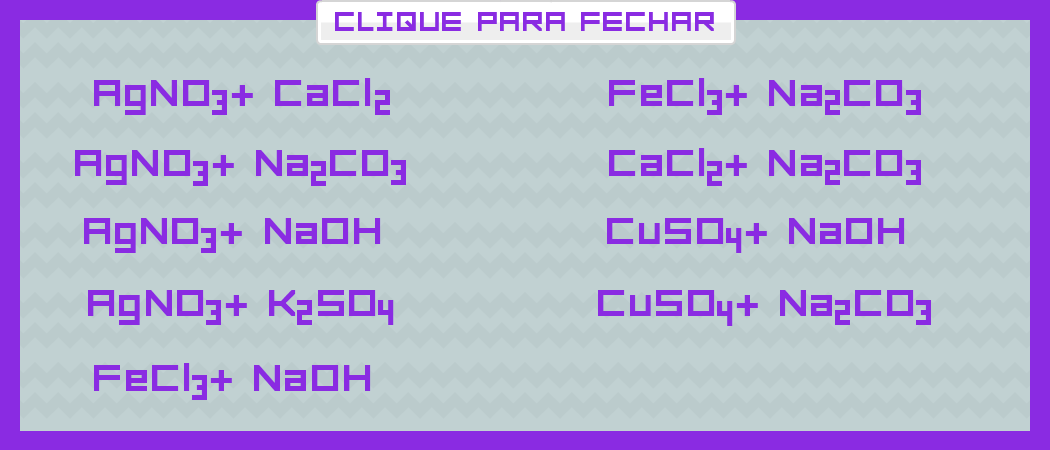
<style>
.page{position:relative;width:1050px;height:450px;background:#c1d1d2}
.page>*{position:absolute;margin:0}
.t1{font:36px "FORCED-SQUARE";color:#8a2be2}
.t2{font:50px "FORCED-SQUARE";color:#8a2be2}
.t3{font:48px "FORCED-SQUARE";color:#8a2be2}
</style>
<div class="page">
<p class="t1" style="left:335px;top:12px;width:379px;height:19px">CLIQUE PARA FECHAR</p>
<p class="t2" style="left:94px;top:78px;width:277px;height:37px">AgNO + CaCl</p>
<p class="t2" style="left:609px;top:78px;width:294px;height:28px">FeCl + Na CO</p>
<p class="t3" style="left:212px;top:90px;width:15px;height:25px">3</p>
<p class="t3" style="left:375px;top:90px;width:15px;height:25px">2</p>
<p class="t3" style="left:707px;top:90px;width:15px;height:25px">3</p>
<p class="t3" style="left:825px;top:90px;width:15px;height:25px">2</p>
<p class="t3" style="left:906px;top:90px;width:15px;height:25px">3</p>
<p class="t2" style="left:75px;top:150px;width:314px;height:35px">AgNO + Na CO</p>
<p class="t2" style="left:609px;top:148px;width:294px;height:28px">CaCl + Na CO</p>
<p class="t3" style="left:193px;top:161px;width:15px;height:25px">3</p>
<p class="t3" style="left:311px;top:161px;width:15px;height:25px">2</p>
<p class="t3" style="left:391px;top:160px;width:15px;height:25px">3</p>
<p class="t3" style="left:707px;top:161px;width:15px;height:25px">2</p>
<p class="t3" style="left:825px;top:160px;width:15px;height:25px">2</p>
<p class="t3" style="left:906px;top:160px;width:15px;height:25px">3</p>
<p class="t2" style="left:84px;top:218px;width:297px;height:35px">AgNO + NaOH</p>
<p class="t2" style="left:607px;top:218px;width:298px;height:26px">CuSO + NaOH</p>
<p class="t3" style="left:201px;top:228px;width:15px;height:25px">3</p>
<p class="t3" style="left:726px;top:228px;width:16px;height:25px">4</p>
<p class="t2" style="left:88px;top:290px;width:288px;height:35px">AgNO + K SO</p>
<p class="t2" style="left:598px;top:290px;width:316px;height:26px">CuSO + Na CO</p>
<p class="t3" style="left:206px;top:300px;width:15px;height:25px">3</p>
<p class="t3" style="left:297px;top:300px;width:15px;height:25px">2</p>
<p class="t3" style="left:378px;top:300px;width:16px;height:25px">4</p>
<p class="t3" style="left:717px;top:301px;width:16px;height:25px">4</p>
<p class="t3" style="left:835px;top:300px;width:15px;height:25px">2</p>
<p class="t3" style="left:916px;top:300px;width:15px;height:25px">3</p>
<p class="t2" style="left:94px;top:363px;width:277px;height:28px">FeCl + NaOH</p>
<p class="t3" style="left:192px;top:375px;width:15px;height:25px">3</p>
</div>
